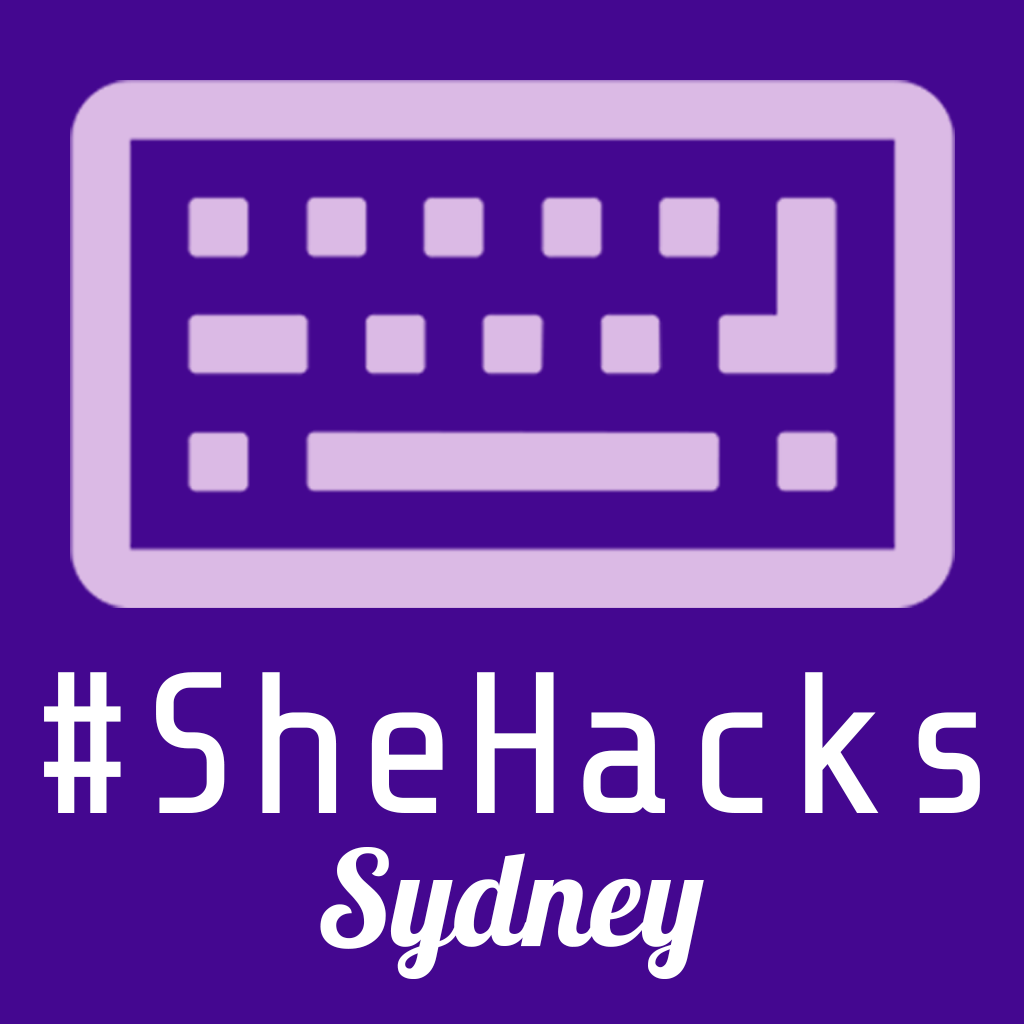
<style>
.page{position:relative;width:1024px;height:1024px;background:#440790}
.page>*{position:absolute;margin:0}
.t1{font:200.9px "ShareTechMono-Regular";color:#ffffff}
.t2{font:131.8px "Lobster";color:#ffffff}
</style>
<div class="page">
<p class="t1" style="left:44px;top:672px;width:936px;height:141px">#SheHacks</p>
<p class="t2" style="left:320px;top:847px;width:384px;height:132px">Sydney</p>
</div>
